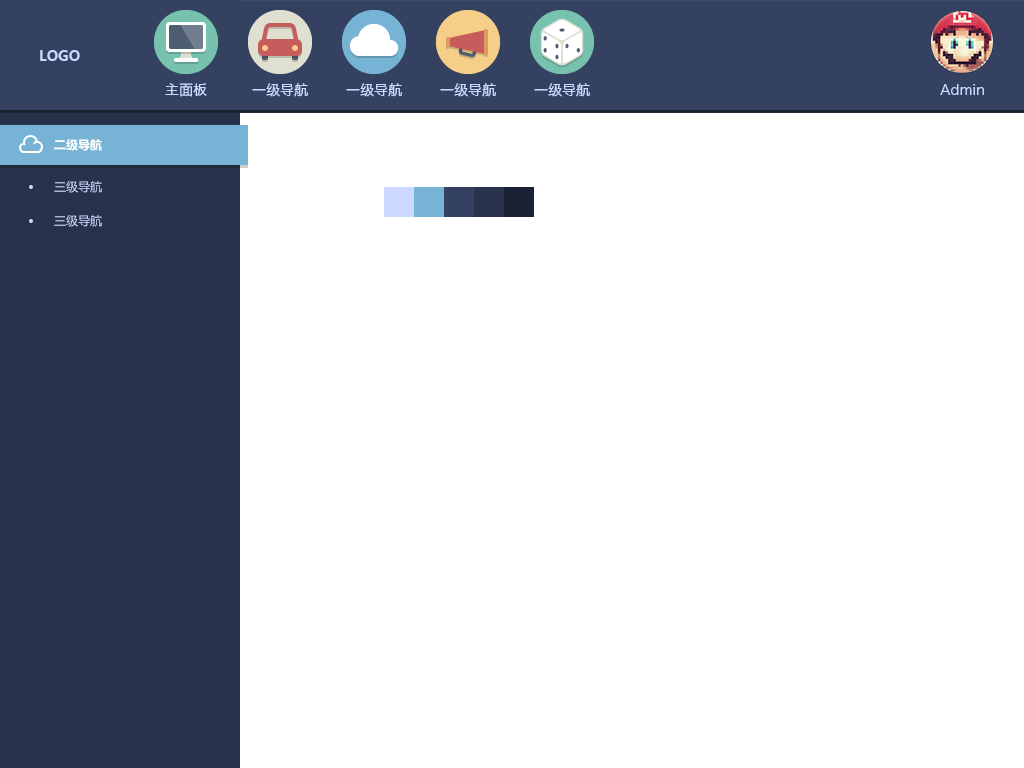
<style>
.page{position:relative;width:1024px;height:768px;background:#ffffff}
.page>*{position:absolute;margin:0}
.t1{font:14px "MicrosoftYaHei-Bold";color:#ccd8ff}
.t2{font:14px "HiraginoSansGB-W3";color:#ccd8ff}
.t3{font:12px "MicrosoftYaHei-Bold";color:#ffffff}
.t4{font:12px "MicrosoftYaHei";color:#ccd8ff}
</style>
<div class="page">
<p class="t1" style="left:40px;top:50px;width:40px;height:11px">LOGO</p>
<p class="t2" style="left:165px;top:83px;width:42px;height:14px">主面板</p>
<p class="t2" style="left:252px;top:83px;width:56px;height:14px">一级导航</p>
<p class="t2" style="left:346px;top:83px;width:56px;height:14px">一级导航</p>
<p class="t2" style="left:440px;top:83px;width:56px;height:14px">一级导航</p>
<p class="t2" style="left:534px;top:83px;width:56px;height:14px">一级导航</p>
<p class="t2" style="left:940px;top:84px;width:44px;height:11px">Admin</p>
<p class="t3" style="left:54px;top:139px;width:48px;height:12px">二级导航</p>
<p class="t4" style="left:54px;top:181px;width:48px;height:12px">三级导航</p>
<p class="t4" style="left:54px;top:215px;width:48px;height:12px">三级导航</p>
</div>
